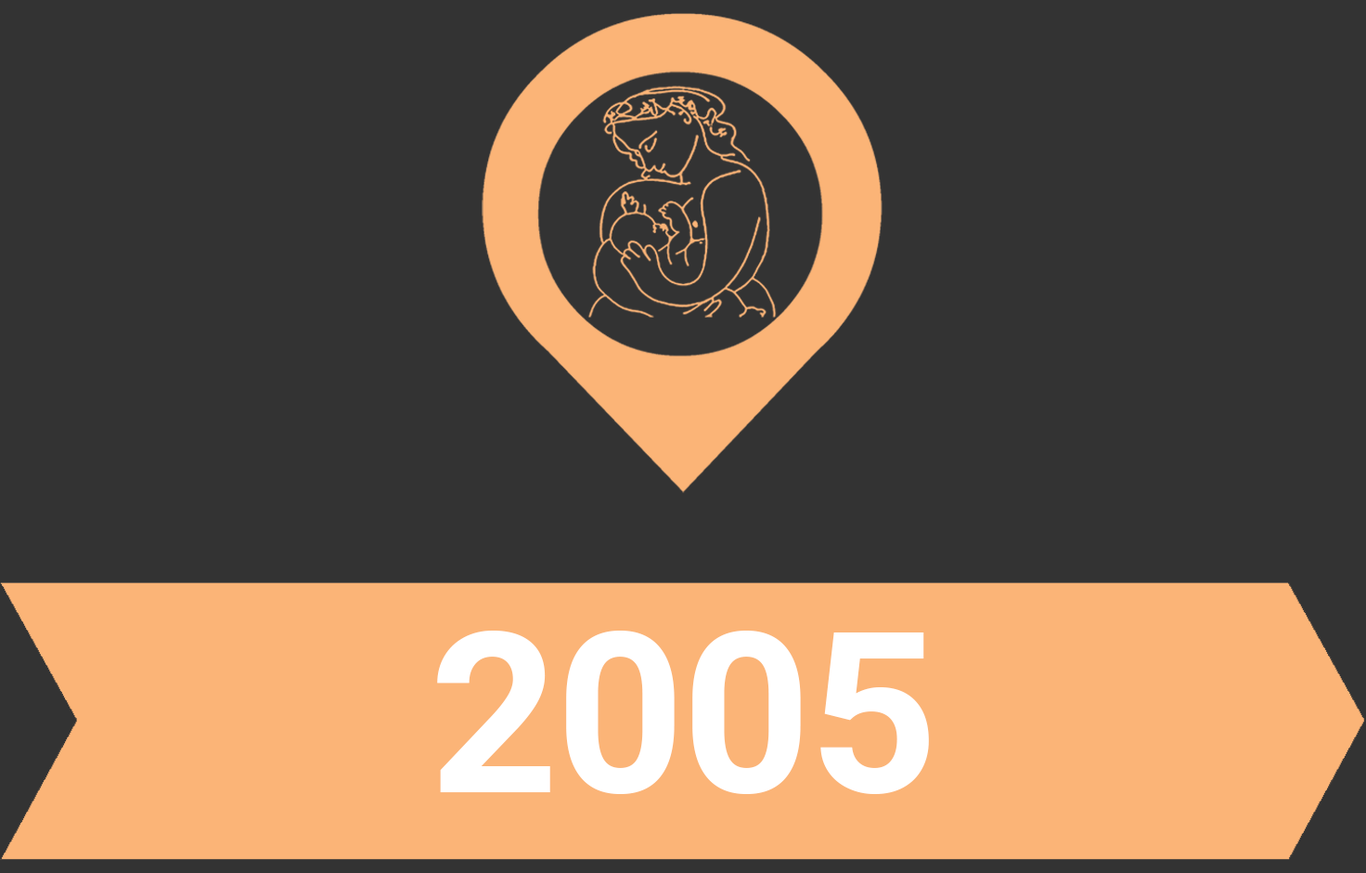
<style>
.page{position:relative;width:1366px;height:873px;background:#333333}
.page>*{position:absolute;margin:0}
.t1{font:224.5px "Roboto-Bold";letter-spacing:-0.01em;color:#ffffff}
</style>
<div class="page">
<p class="t1" style="left:437px;top:630px;width:492px;height:164px">2005</p>
</div>
